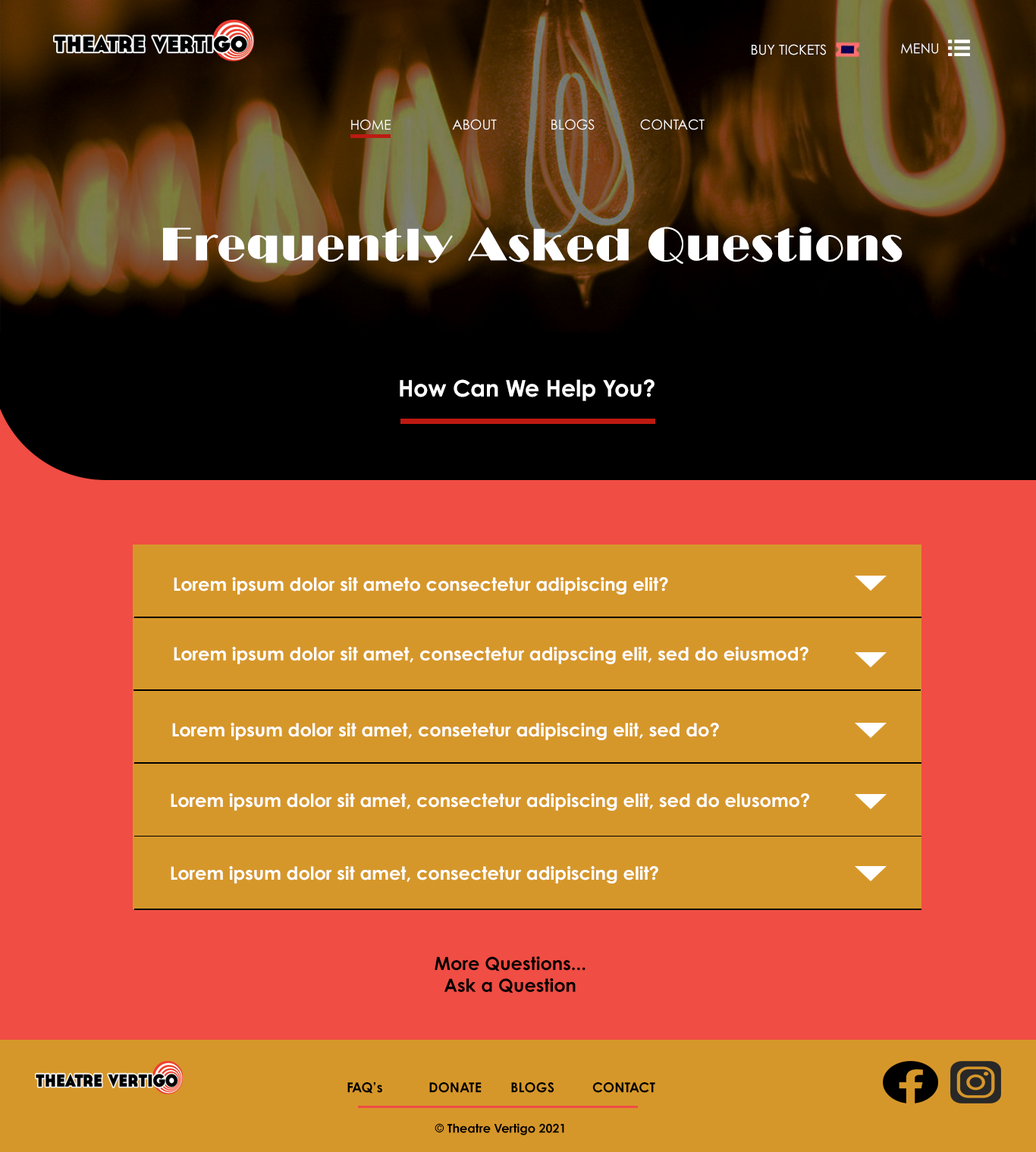
<style>
.page{position:relative;width:1036px;height:1152px;background:#d6972a}
.page>*{position:absolute;margin:0}
.t1{font:13.6px "CenturyGothicPro";color:#ffffff}
.t2{font:46.5px "LTCBroadway-Regular";color:#ffffff}
.t3{font:22.7px "CenturyGothicPro-Bold";color:#ffffff}
.t4{font:18.2px "CenturyGothicPro-Bold";color:#ffffff}
.t5{font:18.2px "CenturyGothicPro-Bold";color:#000000}
.t6{font:13.6px "CenturyGothicPro-Bold";color:#000000}
.t7{font:12.1px "CenturyGothicPro-Bold";color:#000000}
</style>
<div class="page">
<p class="t1" style="left:751px;top:44px;width:75px;height:11px">BUY TICKETS</p>
<p class="t1" style="left:901px;top:43px;width:37px;height:11px">MENU</p>
<p class="t1" style="left:351px;top:119px;width:39px;height:11px">HOME</p>
<p class="t1" style="left:452px;top:119px;width:45px;height:11px">ABOUT</p>
<p class="t1" style="left:551px;top:119px;width:43px;height:11px">BLOGS</p>
<p class="t1" style="left:640px;top:119px;width:64px;height:11px">CONTACT</p>
<p class="t2" style="left:163px;top:227px;width:739px;height:37px">Frequently Asked Questions</p>
<p class="t3" style="left:400px;top:379px;width:254px;height:22px">How Can We Help You?</p>
<p class="t4" style="left:174px;top:577px;width:494px;height:17px">Lorem ipsum dolor sit ameto consectetur adipiscing elit?</p>
<p class="t4" style="left:174px;top:646px;width:634px;height:18px">Lorem ipsum dolor sit amet, consectetur adipscing elit, sed do eiusmod?</p>
<p class="t4" style="left:172px;top:722px;width:547px;height:18px">Lorem ipsum dolor sit amet, consetetur adipiscing elit, sed do?</p>
<p class="t4" style="left:171px;top:793px;width:638px;height:17px">Lorem ipsum dolor sit amet, consectetur adipiscing elit, sed do elusomo?</p>
<p class="t4" style="left:171px;top:866px;width:487px;height:17px">Lorem ipsum dolor sit amet, consectetur adipiscing elit?</p>
<p class="t5" style="left:434px;top:956px;width:151px;height:36px;text-align:center">More Questions...<br>Ask a Question</p>
<p class="t6" style="left:347px;top:1082px;width:308px;height:11px">FAQ’s  DONATE  BLOGS  CONTACT</p>
<p class="t7" style="left:434px;top:1123px;width:130px;height:12px">© Theatre Vertigo 2021</p>
</div>
